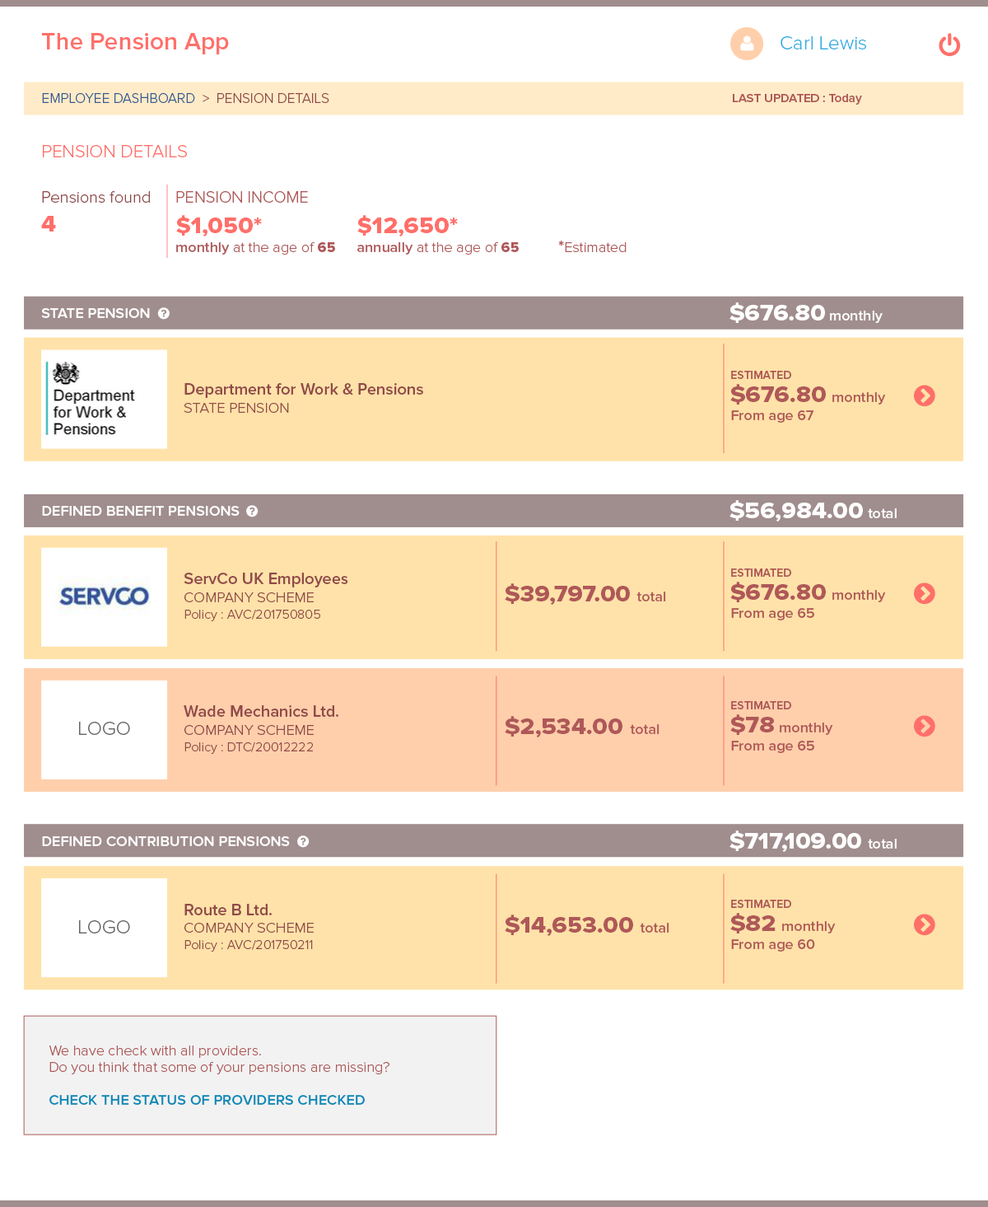
<style>
.page{position:relative;width:988px;height:1207px;background:#ffffff}
.page>*{position:absolute;margin:0}
.t1{font:24.7px "ProximaNova-Semibold";color:#ff6f69}
.t2{font:19.8px "ProximaNova-Light";color:#29abe2}
.t3{font:14px "ProximaNova-Light";color:#345b94}
.t4{font:14px "ProximaNova-Light";color:#914a4a}
.t5{font:12.4px "ProximaNova-Semibold";color:#af5858}
.t6{font:18.1px "ProximaNova-Light";color:#ff6f69}
.t7{font:16.5px "ProximaNova-Light";color:#914a4a}
.t8{font:16.5px "ProximaNova-Light";color:#af5858}
.t9{font:23.1px "ProximaNova-Extrabld";color:#ff6f69;scale:1.06 1}
.t10{font:14.8px "ProximaNova-Light";color:#af5858}
.t11{font:14.8px "ProximaNova-Semibold";color:#af5858}
.t12{font:14.8px "ProximaNova-Extrabld";color:#af5858}
.t13{font:16.5px "ProximaNova-Bold";color:#af5858}
.t14{font:23.1px "ProximaNova-Extrabld";color:#ffffff;scale:1.06 1}
.t15{font:14.8px "ProximaNova-Semibold";color:#ffffff}
.t16{font:11.5px "ProximaNova-Semibold";color:#af5858}
.t17{font:16.5px "ProximaNova-Semibold";color:#914a4a}
.t18{font:14.8px "ProximaNova-Light";color:#914a4a}
.t19{font:23.1px "ProximaNova-Extrabld";color:#af5858;scale:1.06 1}
.t20{font:13.2px/16.5px "ProximaNova-Light";color:#914a4a}
.t21{font:19.7px "ProximaNova-Light";color:#666666}
.t22{font:14.8px/16.5px "ProximaNova-Light";color:#af5858}
.t23{font:14.8px/16.5px "ProximaNova-Semibold";color:#088ab7}
</style>
<div class="page">
<p class="t1" style="left:42px;top:33px;width:187px;height:21px">The Pension App</p>
<p class="t2" style="left:781px;top:36px;width:85px;height:13px">Carl Lewis</p>
<p class="t3" style="left:42px;top:93px;width:287px;height:10px">EMPLOYEE DASHBOARD<span class="t4">  &gt;  PENSION DETAILS</span></p>
<p class="t5" style="left:733px;top:94px;width:129px;height:11px">LAST UPDATED : Today</p>
<p class="t6" style="left:43px;top:145px;width:144px;height:12px">PENSION DETAILS</p>
<p class="t7" style="left:42px;top:191px;width:108px;height:12px">Pensions found</p>
<p class="t8" style="left:176px;top:191px;width:132px;height:12px">PENSION INCOME</p>
<p class="t9" style="left:41px;top:216px;width:15px;height:15px">4</p>
<p class="t9" style="left:176px;top:215px;width:86px;height:21px">$1,050*</p>
<p class="t9" style="left:357px;top:215px;width:101px;height:21px">$12,650*</p>
<p class="t10" style="left:176px;top:241px;width:159px;height:13px"><span class="t11">monthly</span> at the age of <span class="t12">65</span></p>
<p class="t10" style="left:357px;top:241px;width:162px;height:13px"><span class="t11">annually</span> at the age of <span class="t12">65</span></p>
<p class="t10" style="left:558px;top:240px;width:69px;height:12px"><span class="t13">*</span>Estimated</p>
<p class="t14" style="left:730px;top:302px;width:95px;height:21px">$676.80</p>
<p class="t15" style="left:41px;top:308px;width:109px;height:10px">STATE PENSION</p>
<p class="t15" style="left:830px;top:310px;width:53px;height:13px">monthly</p>
<p class="t16" style="left:731px;top:371px;width:60px;height:8px">ESTIMATED</p>
<p class="t17" style="left:184px;top:383px;width:239px;height:30px">Department for Work &amp; Pensions<br><span class="t18">STATE PENSION</span></p>
<p class="t19" style="left:731px;top:384px;width:95px;height:20px">$676.80</p>
<p class="t11" style="left:833px;top:392px;width:53px;height:12px">monthly</p>
<p class="t11" style="left:731px;top:410px;width:83px;height:12px">From age 67</p>
<p class="t15" style="left:42px;top:506px;width:198px;height:10px">DEFINED BENEFIT PENSIONS</p>
<p class="t14" style="left:730px;top:500px;width:133px;height:21px">$56,984.00</p>
<p class="t15" style="left:868px;top:508px;width:29px;height:10px">total</p>
<p class="t16" style="left:731px;top:568px;width:60px;height:9px">ESTIMATED</p>
<p class="t20" style="left:184px;top:572px;width:164px;height:49px"><span class="t17">ServCo UK Employees<br></span><span class="t18">COMPANY SCHEME<br></span>Policy : AVC/201750805</p>
<p class="t19" style="left:731px;top:581px;width:95px;height:21px">$676.80</p>
<p class="t19" style="left:505px;top:583px;width:125px;height:22px">$39,797.00</p>
<p class="t11" style="left:637px;top:591px;width:29px;height:10px">total</p>
<p class="t11" style="left:833px;top:590px;width:53px;height:12px">monthly</p>
<p class="t11" style="left:731px;top:608px;width:84px;height:12px">From age 65</p>
<p class="t16" style="left:731px;top:701px;width:60px;height:8px">ESTIMATED</p>
<p class="t20" style="left:184px;top:705px;width:154px;height:49px"><span class="t17">Wade Mechanics Ltd.<br></span><span class="t18">COMPANY SCHEME<br></span>Policy : DTC/20012222</p>
<p class="t21" style="left:79px;top:721px;width:51px;height:14px">LOGO</p>
<p class="t19" style="left:505px;top:716px;width:118px;height:21px">$2,534.00</p>
<p class="t11" style="left:630px;top:724px;width:30px;height:10px">total</p>
<p class="t19" style="left:731px;top:714px;width:43px;height:21px">$78</p>
<p class="t11" style="left:780px;top:722px;width:53px;height:13px">monthly</p>
<p class="t11" style="left:731px;top:740px;width:84px;height:13px">From age 65</p>
<p class="t14" style="left:730px;top:830px;width:131px;height:22px">$717,109.00</p>
<p class="t15" style="left:42px;top:836px;width:248px;height:10px">DEFINED CONTRIBUTION PENSIONS</p>
<p class="t15" style="left:868px;top:838px;width:29px;height:10px">total</p>
<p class="t20" style="left:184px;top:903px;width:130px;height:48px"><span class="t17">Route B Ltd.<br></span><span class="t18">COMPANY SCHEME<br></span>Policy : AVC/201750211</p>
<p class="t16" style="left:731px;top:899px;width:60px;height:9px">ESTIMATED</p>
<p class="t19" style="left:505px;top:914px;width:128px;height:22px">$14,653.00</p>
<p class="t19" style="left:731px;top:913px;width:45px;height:20px">$82</p>
<p class="t21" style="left:79px;top:920px;width:51px;height:13px">LOGO</p>
<p class="t11" style="left:640px;top:922px;width:30px;height:10px">total</p>
<p class="t11" style="left:782px;top:921px;width:54px;height:12px">monthly</p>
<p class="t11" style="left:731px;top:939px;width:84px;height:12px">From age 60</p>
<p class="t22" style="left:49px;top:1045px;width:341px;height:59px">We have check with all providers.<br>Do you think that some of your pensions are missing?<br><br><span class="t23">CHECK THE STATUS OF PROVIDERS CHECKED</span></p>
</div>
